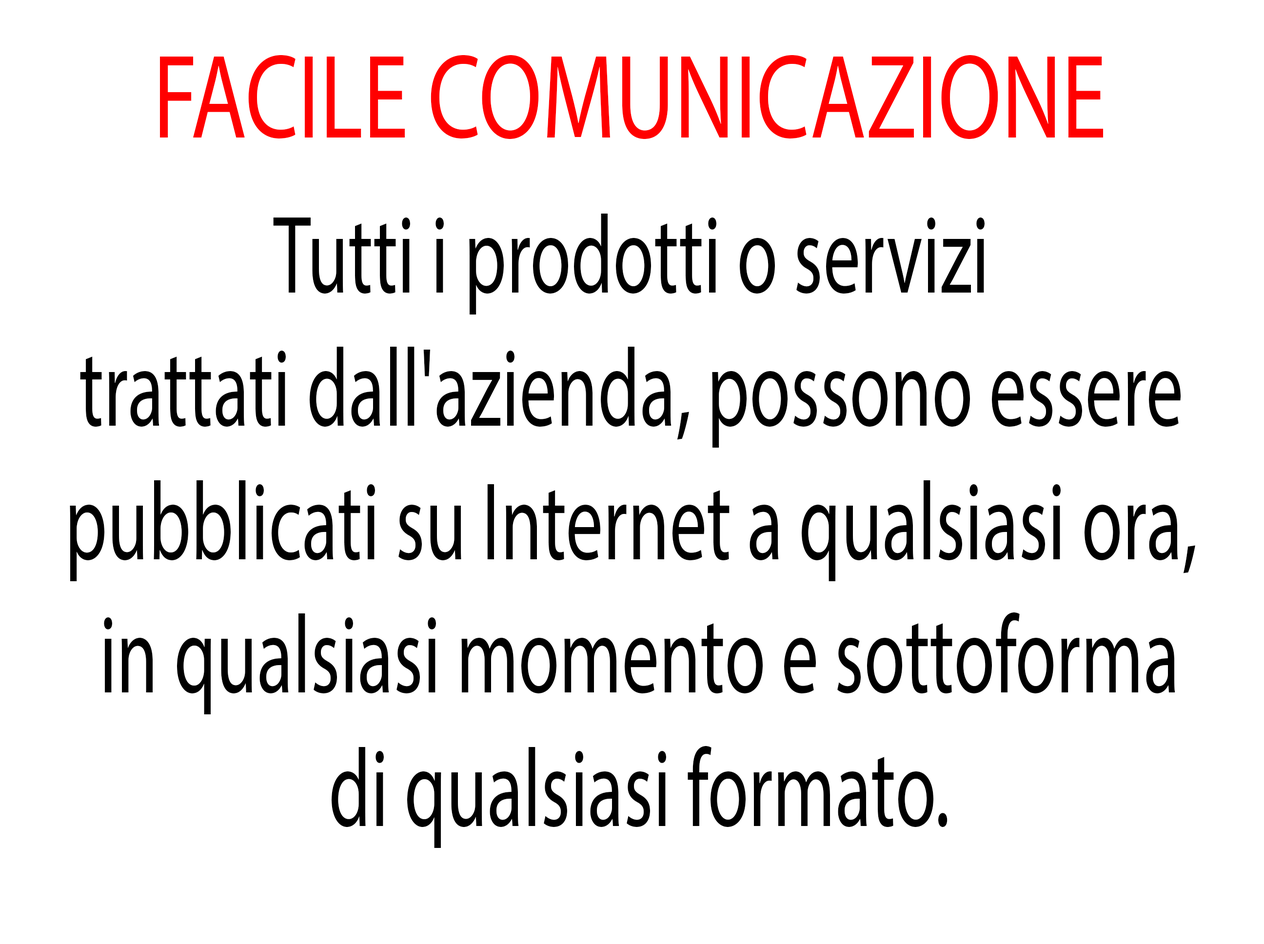
<style>
.page{position:relative;width:1264px;height:944px;background:#ffffff}
.page>*{position:absolute;margin:0}
.t1{font:120.1px "MyriadPro-Regular";color:#ff0000;scale:0.76 1}
.t2{font:111.1px "MyriadPro-Regular";color:#000000;scale:0.67 1}
</style>
<div class="page">
<p class="t1" style="left:160px;top:55px;width:943px;height:84px">FACILE COMUNICAZIONE</p>
<p class="t2" style="left:70px;top:214px;width:1125px;height:634px;text-align:center">Tutti i prodotti o servizi <br>trattati dall'azienda, possono essere <br>pubblicati su Internet a qualsiasi ora, <br>in qualsiasi momento e sottoforma<br>di qualsiasi formato.</p>
</div>
